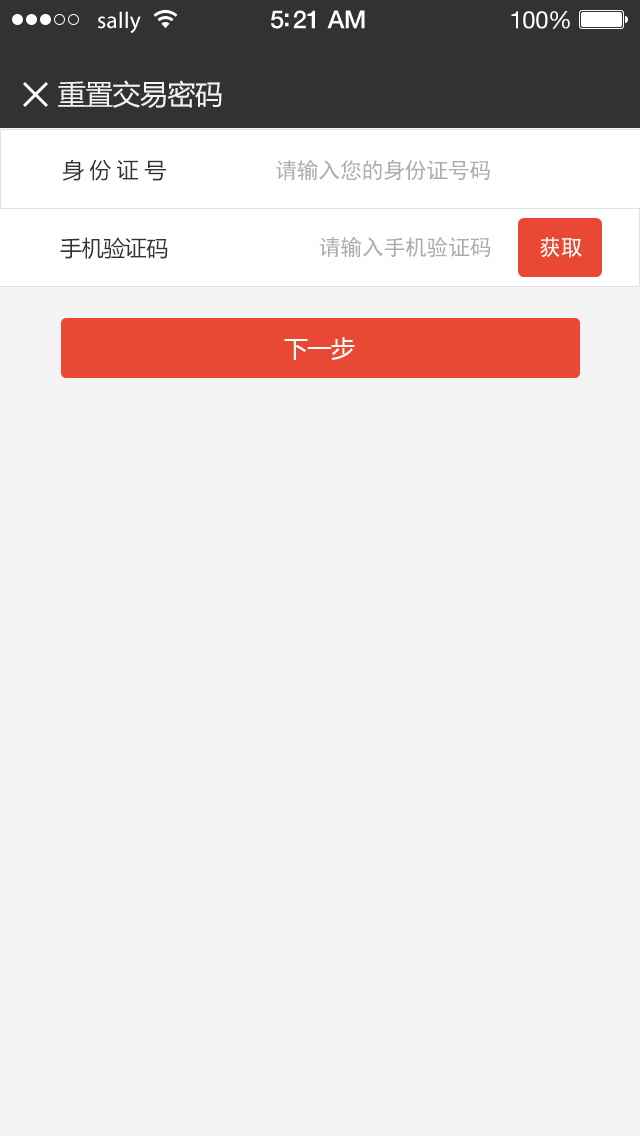
<style>
.page{position:relative;width:640px;height:1136px;background:#f3f3f3}
.page>*{position:absolute;margin:0}
.t1{font:23px "MyriadPro-Regular";letter-spacing:0.02em;color:#ffffff}
.t2{font:25px "HelveticaNeue-Medium";letter-spacing:-0.02em;color:#ffffff}
.t3{font:24px "HelveticaNeue";letter-spacing:-0.02em;color:#ffffff}
.t4{font:28px "MicrosoftYaHei";letter-spacing:-0.02em;color:#f3f3f3}
.t5{font:22px "MicrosoftYaHei";letter-spacing:0.24em;color:#323232}
.t6{font:22px "SimHei";letter-spacing:-0.02em;color:#acacac}
.t7{font:22px "MicrosoftYaHei";letter-spacing:-0.02em;color:#323232}
.t8{font:22px "SimHei";letter-spacing:-0.02em;color:#ffffff}
.t9{font:24px "MicrosoftYaHei";letter-spacing:-0.02em;color:#ffffff}
</style>
<div class="page">
<p class="t1" style="left:98px;top:11px;width:43px;height:22px">sally</p>
<p class="t2" style="left:271px;top:10px;width:94px;height:19px">5:21 AM</p>
<p class="t3" style="left:511px;top:11px;width:59px;height:18px">100%</p>
<p class="t4" style="left:58px;top:80px;width:164px;height:28px">重置交易密码</p>
<p class="t5" style="left:62px;top:159px;width:104px;height:22px">身份证号</p>
<p class="t6" style="left:276px;top:159px;width:214px;height:22px">请输入您的身份证号码</p>
<p class="t7" style="left:60px;top:237px;width:108px;height:22px">手机验证码</p>
<p class="t6" style="left:319px;top:236px;width:172px;height:22px">请输入手机验证码</p>
<p class="t8" style="left:540px;top:237px;width:42px;height:21px">获取</p>
<p class="t9" style="left:284px;top:337px;width:71px;height:23px">下一步</p>
</div>
